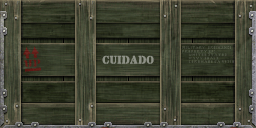
<style>
.page{position:relative;width:256px;height:128px}
.page>*{position:absolute;margin:0}
.t1{font:10px "Lintsec-Regular";letter-spacing:0.005em;color:#8e9186;font-weight:bold;scale:0.8 1}
</style>
<div class="page">
<p class="t1" style="left:102px;top:55px;width:52px;height:9px">CUIDADO</p>
</div>
